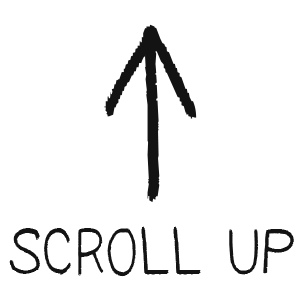
<style>
.page{position:relative;width:300px;height:295px;background:#ffffff}
.page>*{position:absolute;margin:0}
.t1{font:246.6px "Hosofuwafont";color:#131313;scale:0.94 1}
.t2{font:257.1px "Hosofuwafont";color:#131313;scale:0.72 1}
.t3{font:76.6px "Hosofuwafont";color:#131313}
</style>
<div class="page">
<p class="t1" style="left:104px;top:24px;width:93px;height:95px;rotate:-180deg">v</p>
<p class="t2" style="left:145px;top:34px;width:15px;height:169px">l</p>
<p class="t3" style="left:9px;top:226px;width:285px;height:51px">SCROLL UP</p>
</div>
